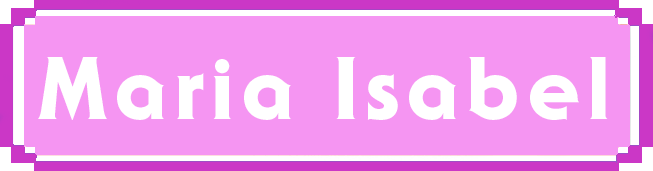
<style>
.page{position:relative;width:653px;height:171px;background:#f595f2}
.page>*{position:absolute;margin:0}
.t1{font:87px "SerifGothic-Heavy";letter-spacing:0.08em;color:#ffffff}
</style>
<div class="page">
<p class="t1" style="left:38px;top:57px;width:570px;height:63px">Maria Isabel</p>
</div>
